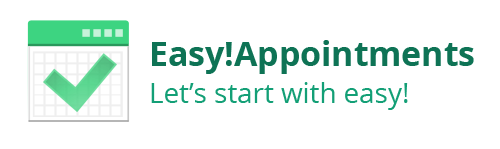
<style>
.page{position:relative;width:500px;height:149px;background:#ffffff}
.page>*{position:absolute;margin:0}
.t1{font:33.8px "OpenSans-Bold";color:#0e7355}
.t2{font:27.8px "OpenSans";color:#139f76}
</style>
<div class="page">
<p class="t1" style="left:152px;top:40px;width:322px;height:34px">Easy!Appointments</p>
<p class="t2" style="left:151px;top:82px;width:257px;height:28px">Let’s start with easy!</p>
</div>
